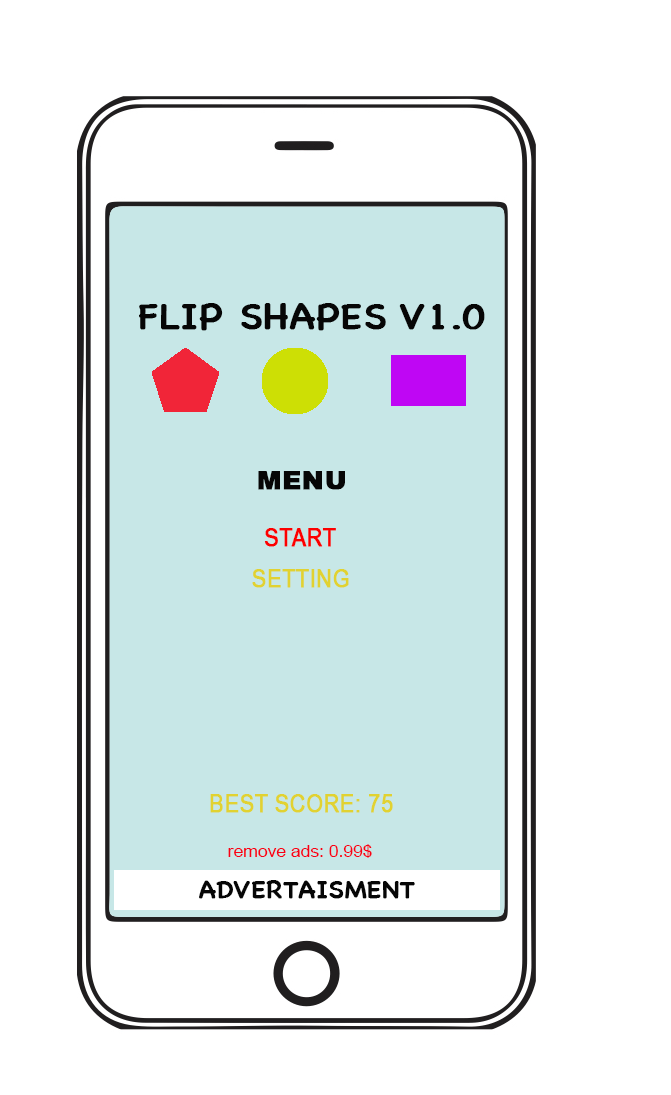
<style>
.page{position:relative;width:671px;height:1095px;background:#ffffff}
.page>*{position:absolute;margin:0}
.t1{font:37.5px "ChalkboardSE-Regular";color:#060606;text-transform:uppercase;font-weight:bold;scale:1.05 1}
.t2{font:12px "Arial-Black";color:#060606;text-transform:uppercase;font-weight:bold;scale:1.05 1}
.t3{font:12px "ArialNarrow";color:#fc0000;text-transform:uppercase;font-weight:bold;scale:1.05 1}
.t4{font:12px "ArialNarrow";color:#e1d231;text-transform:uppercase;font-weight:bold;scale:1.05 1}
.t5{font:16.7px "ArialMT";color:#f80017;scale:1.05 1}
.t6{font:25px "ChalkboardSE-Regular";color:#060606;text-transform:uppercase;font-weight:bold;scale:1.05 1}
</style>
<div class="page">
<p class="t1" style="left:139px;top:303px;width:346px;height:28px">Flip SHapes v1.0</p>
<p class="t2" style="left:258px;top:471px;width:87px;height:19px">MENU</p>
<p class="t3" style="left:264px;top:528px;width:72px;height:19px">START</p>
<p class="t4" style="left:252px;top:569px;width:97px;height:19px">SETting</p>
<p class="t4" style="left:210px;top:794px;width:183px;height:19px">BEST SCORE: 75</p>
<p class="t5" style="left:228px;top:844px;width:144px;height:14px">remove ads: 0.99$</p>
<p class="t6" style="left:199px;top:880px;width:216px;height:19px">ADVERTAISMENT</p>
</div>
